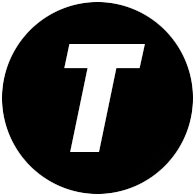
<style>
.page{position:relative;width:196px;height:196px;background:#000000}
.page>*{position:absolute;margin:0}
.t1{font:150px "NotoSans-BlackItalic";color:#ffffff}
</style>
<div class="page">
<p class="t1" style="left:64px;top:44px;width:81px;height:108px">T</p>
</div>
